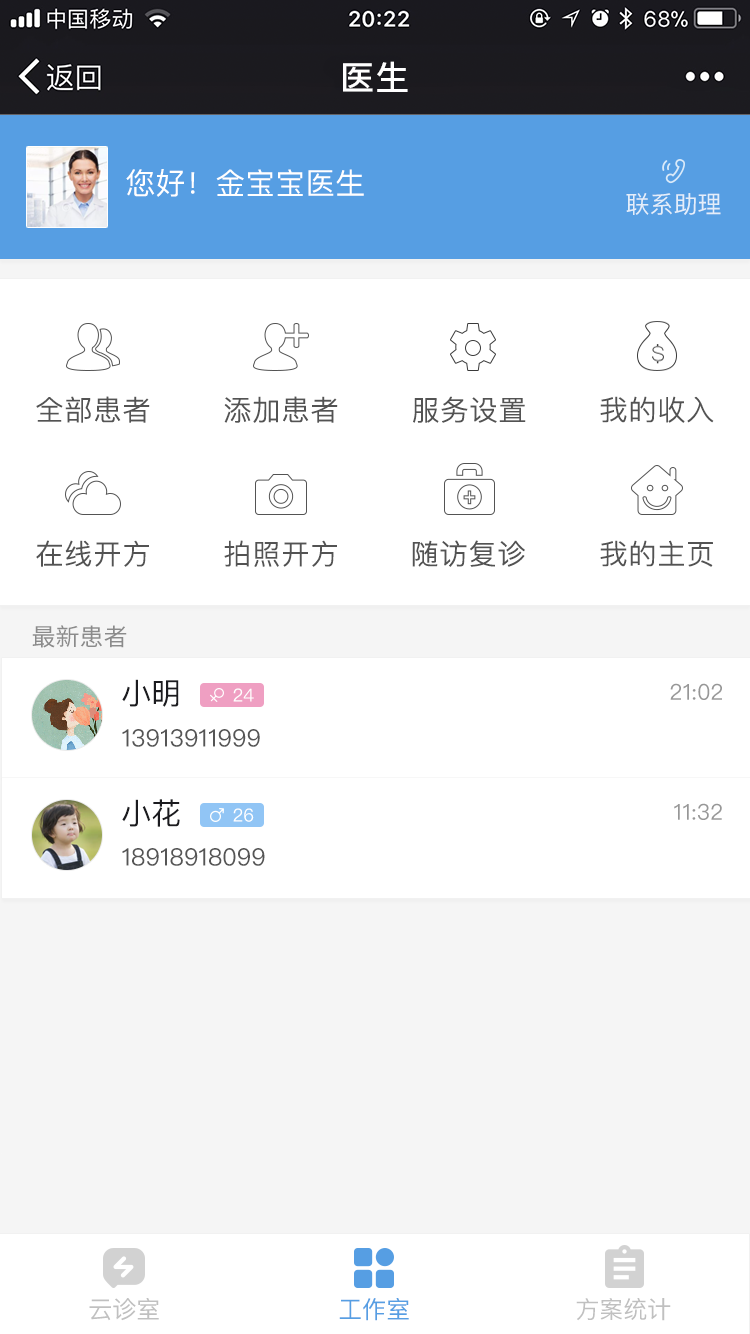
<style>
.page{position:relative;width:750px;height:1334px;background:#ffffff}
.page>*{position:absolute;margin:0}
.t1{font:34px "SourceHanSansCN-Medium";letter-spacing:0.02em;color:#ffffff}
.t2{font:30px "PingFangSC-Regular";color:#ffffff}
.t3{font:24px "PingFangSC-Regular";color:#e4eefa}
.t4{font:28px "PingFangSC-Light";color:#535353;font-weight:bold}
.t5{font:24px "SourceHanSansCN-Regular";color:#8b8b8b}
.t6{font:30px "PingFangSC-Regular";color:#1b1b1f}
.t7{font:18px "PingFangSC-Regular";color:#ffffff}
.t8{font:22px "PingFangSC-Regular";color:#979797}
.t9{font:24px "PingFangSC-Regular";color:#555555}
.t10{font:24px "PingFangSC-Regular";color:#c0c0c0}
.t11{font:24px "PingFangSC-Regular";color:#569ee3}
</style>
<div class="page">
<p class="t1" style="left:343px;top:61px;width:65px;height:31px">医生</p>
<p class="t2" style="left:126px;top:169px;width:238px;height:28px">您好！金宝宝医生</p>
<p class="t3" style="left:626px;top:193px;width:95px;height:22px">联系助理</p>
<p class="t4" style="left:36px;top:396px;width:114px;height:27px">全部患者</p>
<p class="t4" style="left:224px;top:396px;width:114px;height:27px">添加患者</p>
<p class="t4" style="left:413px;top:396px;width:113px;height:27px">服务设置</p>
<p class="t4" style="left:600px;top:396px;width:114px;height:27px">我的收入</p>
<p class="t4" style="left:36px;top:540px;width:113px;height:27px">在线开方</p>
<p class="t4" style="left:224px;top:540px;width:113px;height:27px">拍照开方</p>
<p class="t4" style="left:412px;top:540px;width:113px;height:27px">随访复诊</p>
<p class="t4" style="left:600px;top:540px;width:113px;height:27px">我的主页</p>
<p class="t5" style="left:32px;top:625px;width:95px;height:23px">最新患者</p>
<p class="t6" style="left:122px;top:679px;width:57px;height:28px">小明</p>
<p class="t7" style="left:233px;top:688px;width:21px;height:14px">24</p>
<p class="t8" style="left:670px;top:683px;width:52px;height:17px">21:02</p>
<p class="t9" style="left:122px;top:729px;width:138px;height:18px">13913911999</p>
<p class="t6" style="left:122px;top:799px;width:58px;height:28px">小花</p>
<p class="t7" style="left:233px;top:808px;width:21px;height:14px">26</p>
<p class="t8" style="left:674px;top:803px;width:48px;height:17px">11:32</p>
<p class="t9" style="left:122px;top:848px;width:143px;height:18px">18918918099</p>
<p class="t10" style="left:89px;top:1298px;width:70px;height:23px">云诊室</p>
<p class="t11" style="left:339px;top:1298px;width:70px;height:23px">工作室</p>
<p class="t10" style="left:576px;top:1298px;width:95px;height:23px">方案统计</p>
</div>
